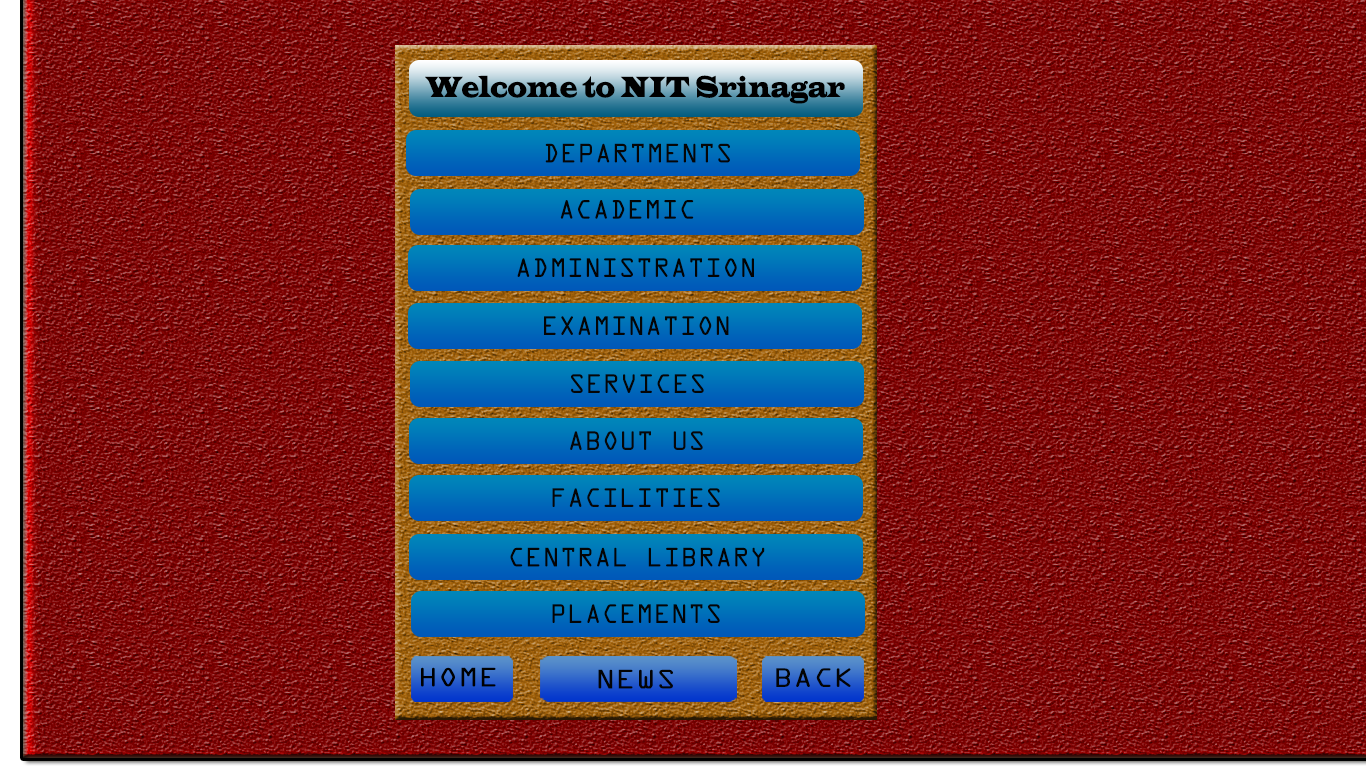
<style>
.page{position:relative;width:1366px;height:768px}
.page>*{position:absolute;margin:0}
.t1{font:30px "LatinWide";color:#000000;scale:0.65 1}
.t2{font:24px "OCRAStd";color:#060606}
.t3{font:24px "OCRAStd";color:#040404}
.t4{font:24px "OCRAStd";color:#030303}
.t5{font:24px "OCRAStd";color:#050505}
.t6{font:24px "OCRAStd";color:#070707}
.t7{font:24px "OCRAStd";color:#000000;scale:1.17 1}
.t8{font:24px "OCRAStd";color:#030303;scale:1.17 1}
.t9{font:24px "OCRAStd";color:#040404;scale:1.17 1}
</style>
<div class="page">
<p class="t1" style="left:425px;top:75px;width:420px;height:29px">Welcome to NIT Srinagar</p>
<p class="t2" style="left:545px;top:143px;width:185px;height:20px">DEPARTMENTS</p>
<p class="t3" style="left:560px;top:200px;width:134px;height:19px">ACADEMIC</p>
<p class="t4" style="left:517px;top:258px;width:237px;height:19px">ADMINISTRATION</p>
<p class="t5" style="left:544px;top:316px;width:185px;height:19px">EXAMINATION</p>
<p class="t5" style="left:571px;top:374px;width:133px;height:19px">SERVICES</p>
<p class="t6" style="left:570px;top:431px;width:133px;height:19px">ABOUT US</p>
<p class="t2" style="left:552px;top:488px;width:168px;height:19px">FACILITIES</p>
<p class="t3" style="left:510px;top:547px;width:255px;height:20px">CENTRAL LIBRARY</p>
<p class="t3" style="left:552px;top:604px;width:168px;height:19px">PLACEMENTS</p>
<p class="t7" style="left:421px;top:667px;width:75px;height:20px">HOME</p>
<p class="t8" style="left:598px;top:669px;width:75px;height:20px">NEWS</p>
<p class="t9" style="left:776px;top:668px;width:75px;height:19px">BACK</p>
</div>
